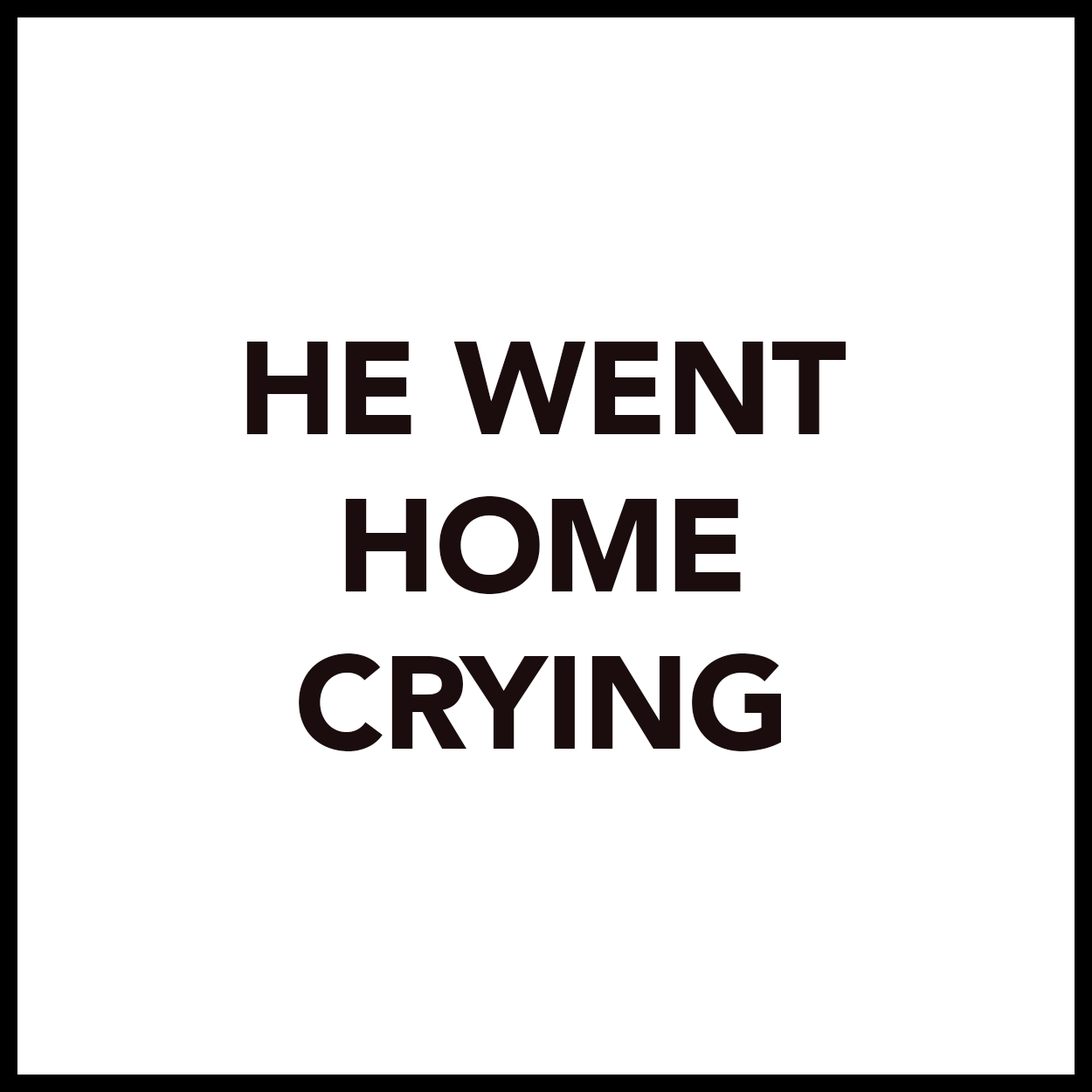
<style>
.page{position:relative;width:1092px;height:1092px;background:#ffffff}
.page>*{position:absolute;margin:0}
.t1{font:131px "Avenir-Black";letter-spacing:-0.01em;color:#1b0d0d}
</style>
<div class="page">
<p class="t1" style="left:246px;top:342px;width:601px;height:409px;text-align:center">HE WENT<br>HOME<br>CRYING</p>
</div>
